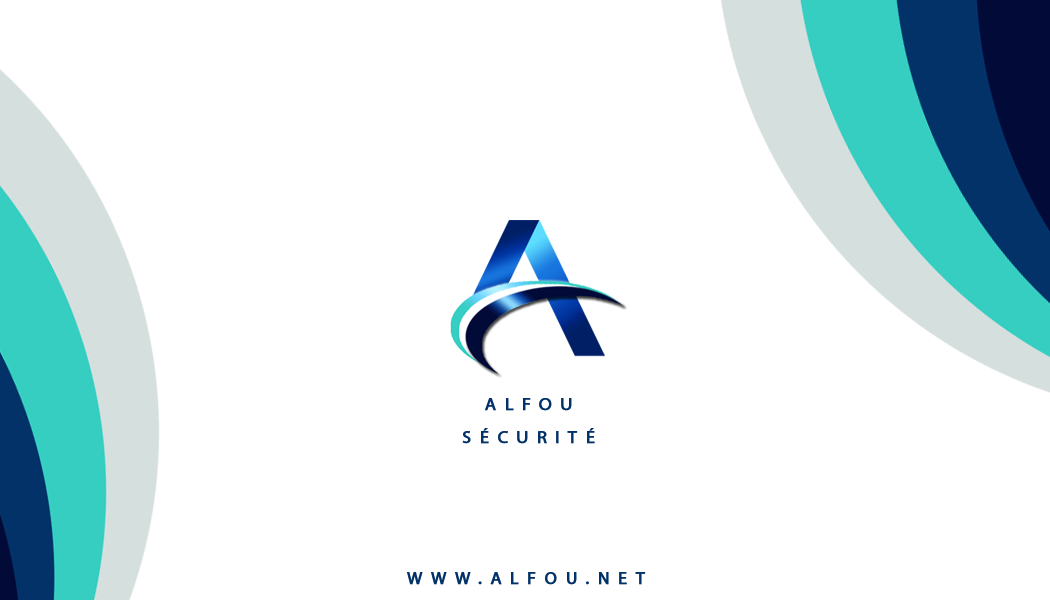
<style>
.page{position:relative;width:1050px;height:600px;background:#ffffff}
.page>*{position:absolute;margin:0}
.t1{font:17.9px/33.3px "MyriadPro-Regular";letter-spacing:0.46em;color:#033268;font-weight:bold}
.t2{font:17.9px "MyriadPro-Regular";letter-spacing:0.46em;color:#033268;font-weight:bold}
</style>
<div class="page">
<p class="t1" style="left:462px;top:398px;width:133px;height:46px;text-align:center">ALFOU<br>SÉCURITÉ</p>
<p class="t2" style="left:407px;top:572px;width:239px;height:13px">WWW.ALFOU.NET</p>
</div>
